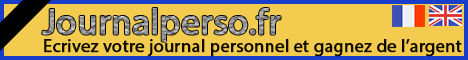
<style>
.page{position:relative;width:468px;height:60px;background:#f3cb4f}
.page>*{position:absolute;margin:0}
.t1{font:36px "MyriadPro-Regular";font-weight:bold}
.t2{font:18px "MyriadPro-Regular";color:#0e0b01;font-weight:bold}
</style>
<div class="page">
<p class="t1" style="left:42px;top:8px;width:239px;height:34px">Journalperso.fr</p>
<p class="t2" style="left:44px;top:39px;width:418px;height:18px">Ecrivez votre journal personnel et gagnez de l’argent</p>
</div>
